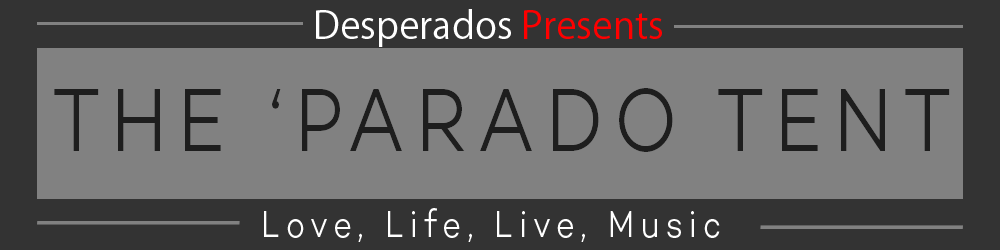
<style>
.page{position:relative;width:1000px;height:250px;background:#818181}
.page>*{position:absolute;margin:0}
.t1{font:38px "KozGoPr6N-Regular";color:#ffffff}
.t2{font:38px "KozGoPr6N-Regular";color:#fe0000}
.t3{font:90.9px "Campton-LightDEMO";letter-spacing:0.15em;color:#1e1e1e;scale:0.83 1}
.t4{font:38px "Campton-LightDEMO";letter-spacing:0.2em;color:#ffffff;scale:0.83 1}
</style>
<div class="page">
<p class="t1" style="left:316px;top:9px;width:346px;height:38px">Desperados <span class="t2">Presents</span></p>
<p class="t3" style="left:54px;top:88px;width:896px;height:64px">THE ‘PARADO TENT</p>
<p class="t4" style="left:264px;top:208px;width:456px;height:34px">Love, Life, Live, Music</p>
</div>
